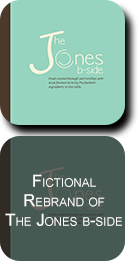
<style>
.page{position:relative;width:139px;height:271px;background:#96d4bf}
.page>*{position:absolute;margin:0}
.t1{font:16.7px/19.4px "ArialMT";color:#ffffff;font-variant:small-caps}
</style>
<div class="page">
<p class="t1" style="left:5px;top:174px;width:117px;height:52px;text-align:center">Fictional Rebrand of <br>The Jones b-side</p>
</div>
